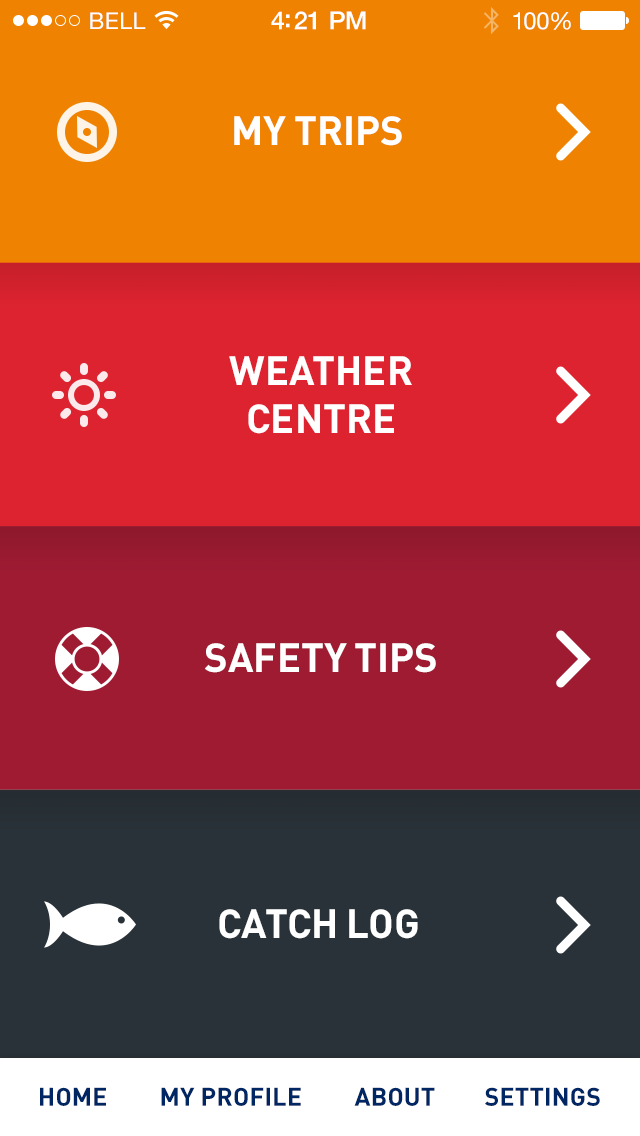
<style>
.page{position:relative;width:640px;height:1136px;background:#ef8200}
.page>*{position:absolute;margin:0}
.t1{font:23px "HelveticaNeue";letter-spacing:0.02em;color:#ffffff}
.t2{font:25px "HelveticaNeue-Medium";letter-spacing:-0.02em;color:#ffffff}
.t3{font:24px "HelveticaNeue";letter-spacing:-0.02em;color:#ffffff}
.t4{font:40px "DIN-Bold";color:#ffffff;text-transform:uppercase}
.t5{font:25px "DIN-Bold";letter-spacing:0.01em;color:#002663;text-transform:uppercase}
</style>
<div class="page">
<p class="t1" style="left:90px;top:12px;width:56px;height:17px">BELL</p>
<p class="t2" style="left:271px;top:11px;width:95px;height:19px">4:21 PM</p>
<p class="t3" style="left:513px;top:12px;width:58px;height:18px">100%</p>
<p class="t4" style="left:234px;top:116px;width:168px;height:30px">my trips</p>
<p class="t4" style="left:229px;top:356px;width:183px;height:78px;text-align:center">weather<br>centre</p>
<p class="t4" style="left:205px;top:643px;width:231px;height:30px">safety tips</p>
<p class="t4" style="left:219px;top:909px;width:199px;height:30px">catch log</p>
<p class="t5" style="left:40px;top:1087px;width:66px;height:19px">Home</p>
<p class="t5" style="left:161px;top:1087px;width:140px;height:19px">My Profile</p>
<p class="t5" style="left:354px;top:1087px;width:81px;height:19px">About</p>
<p class="t5" style="left:485px;top:1087px;width:115px;height:19px">Settings</p>
</div>
